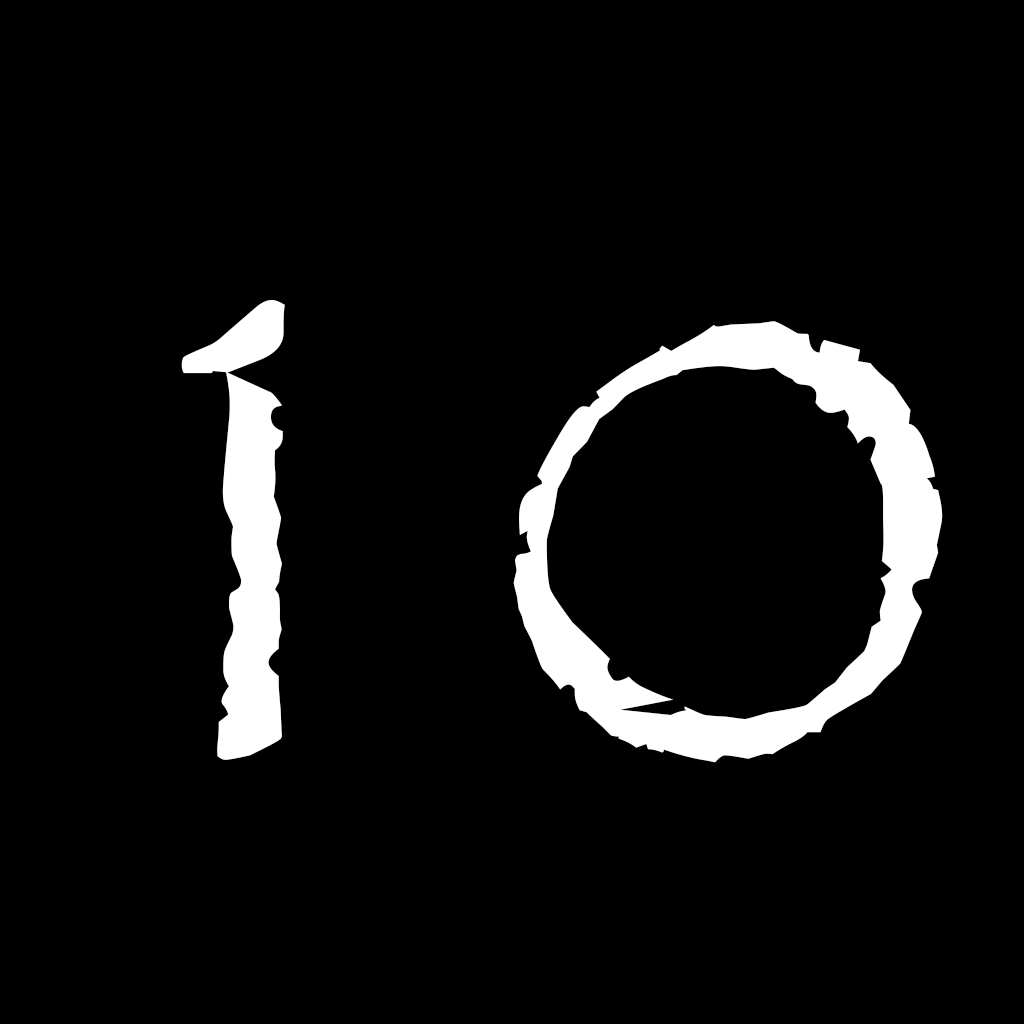
<style>
.page{position:relative;width:1024px;height:1024px;background:#000000}
.page>*{position:absolute;margin:0}
.t1{font:833.3px "Papyrus-Regular";color:#ffffff}
</style>
<div class="page">
<p class="t1" style="left:181px;top:300px;width:762px;height:463px">10</p>
</div>
